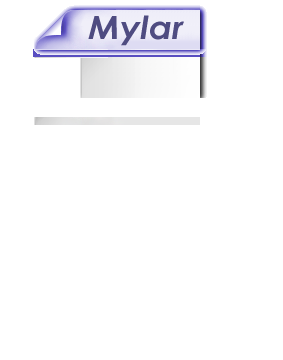
<style>
.page{position:relative;width:283px;height:360px;background:#ffffff}
.page>*{position:absolute;margin:0}
.t1{font:32px "CenturyGothic-BoldItalic";color:#4f4c81;scale:1.1 1}
</style>
<div class="page">
<p class="t1" style="left:88px;top:15px;width:96px;height:31px">Mylar</p>
</div>
